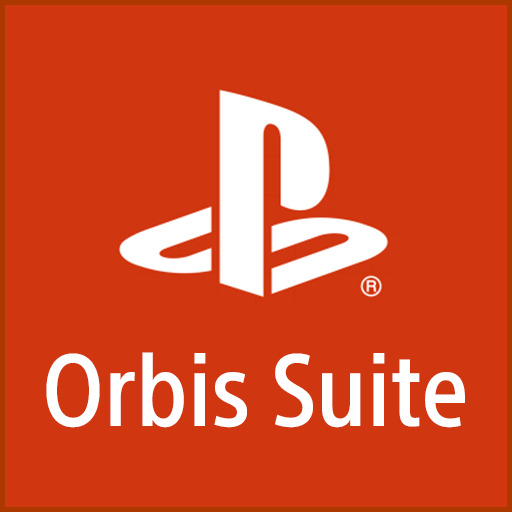
<style>
.page{position:relative;width:512px;height:512px;background:#d03610}
.page>*{position:absolute;margin:0}
.t1{font:100px "SST-CondensedMd";color:#ffffff}
</style>
<div class="page">
<p class="t1" style="left:46px;top:352px;width:419px;height:76px">Orbis Suite</p>
</div>
